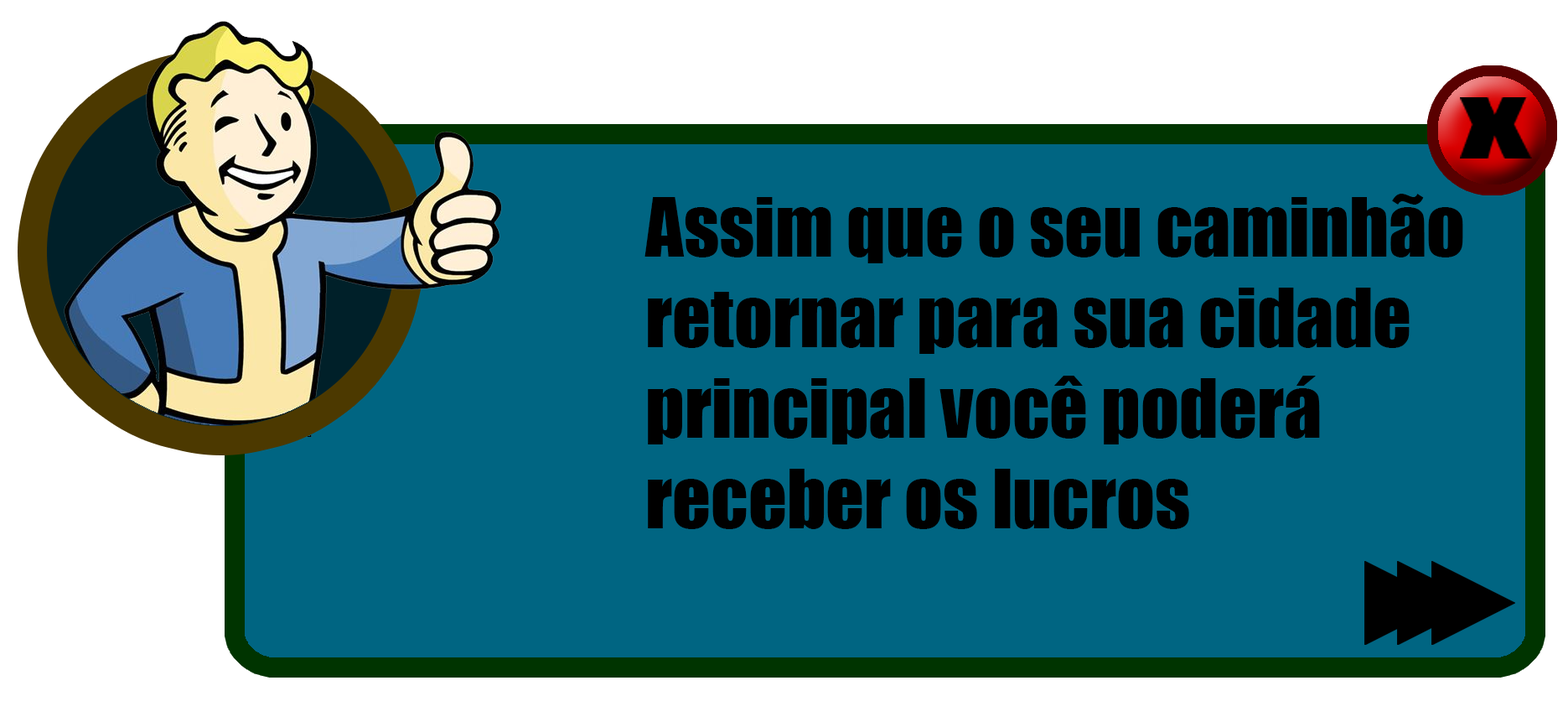
<style>
.page{position:relative;width:1568px;height:722px;background:#006582}
.page>*{position:absolute;margin:0}
.t1{font:75.4px "Impact";color:#000000}
</style>
<div class="page">
<p class="t1" style="left:644px;top:194px;width:819px;height:335px">Assim que o seu caminhão<br>retornar para sua cidade<br>principal você poderá<br>receber os lucros</p>
</div>
